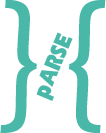
<style>
.page{position:relative;width:106px;height:133px;background:#ffffff}
.page>*{position:absolute;margin:0}
.t1{font:150px "ErasITC-Medium";color:#49b8a8}
.t2{font:26px "ErikaBold";color:#49b8a8;scale:0.78 1}
</style>
<div class="page">
<p class="t1" style="left:0px;top:0px;width:106px;height:133px">}{</p>
<p class="t2" style="left:36px;top:32px;width:37px;height:69px;rotate:-67deg">pARSE</p>
</div>
